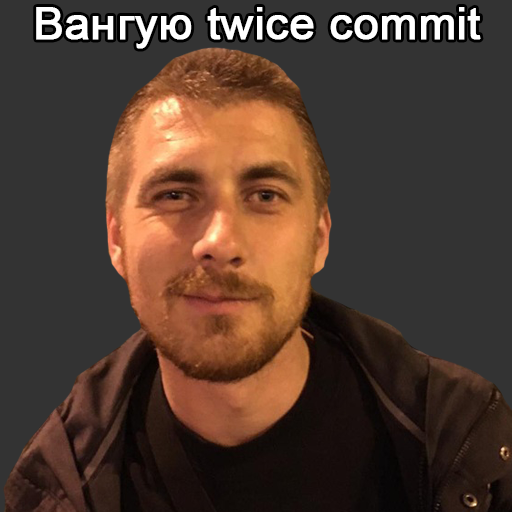
<style>
.page{position:relative;width:512px;height:512px;background:#333333}
.page>*{position:absolute;margin:0}
.t1{font:45px "ArialMT";color:#ffffff;font-weight:bold}
</style>
<div class="page">
<p class="t1" style="left:36px;top:7px;width:445px;height:42px">Вангую twice commit</p>
</div>
